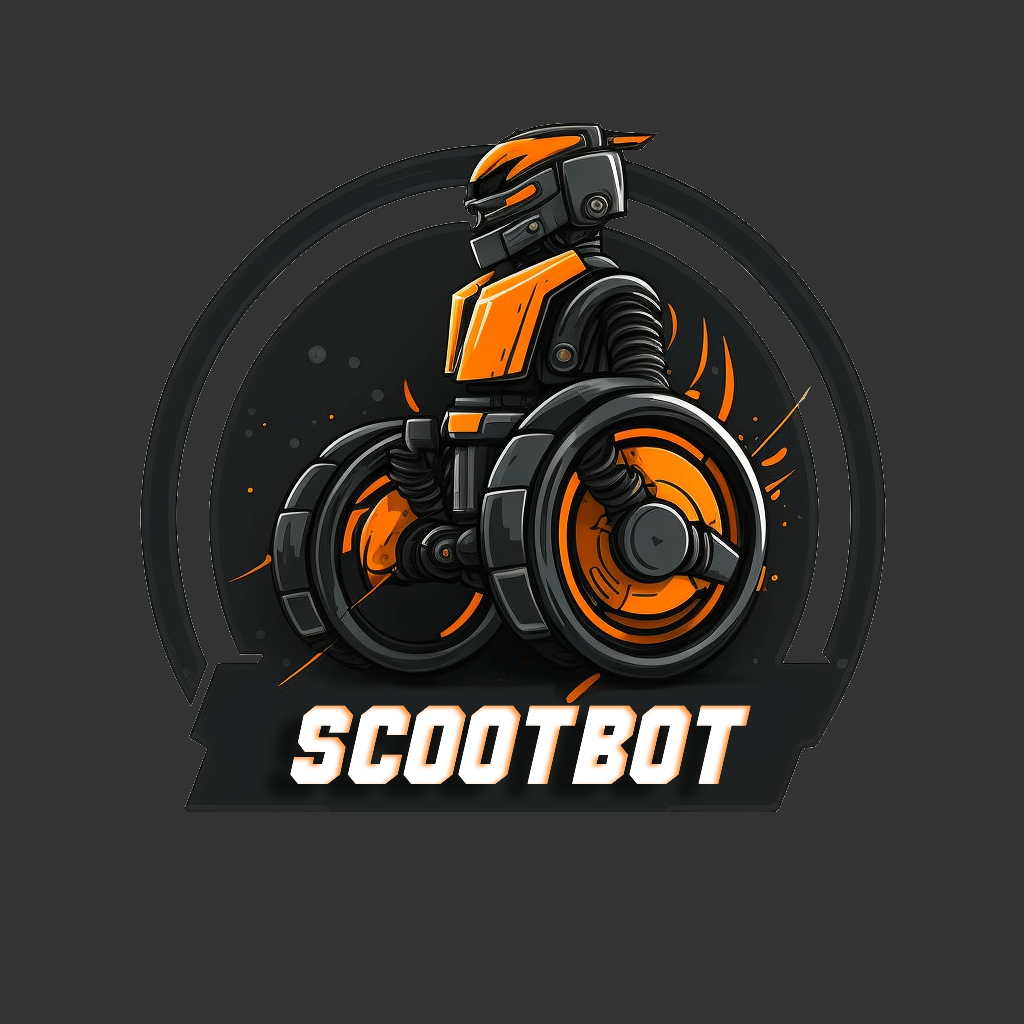
<style>
.page{position:relative;width:1024px;height:1024px;background:#333333}
.page>*{position:absolute;margin:0}
.t1{font:111.5px "Commando";color:#ffffff}
</style>
<div class="page">
<p class="t1" style="left:290px;top:705px;width:461px;height:79px">Scootbot</p>
</div>
